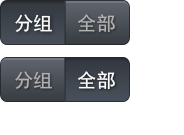
<style>
.page{position:relative;width:184px;height:135px;background:#ffffff}
.page>*{position:absolute;margin:0}
.t1{font:19.3px "SimHei";color:#ffffff}
.t2{font:19.3px "SimHei";color:#b5b5b5}
</style>
<div class="page">
<p class="t1" style="left:15px;top:14px;width:37px;height:18px">分组</p>
<p class="t2" style="left:78px;top:14px;width:37px;height:19px;opacity:0.96">全部</p>
<p class="t2" style="left:15px;top:71px;width:37px;height:18px;opacity:0.96">分组</p>
<p class="t1" style="left:78px;top:71px;width:37px;height:19px">全部</p>
</div>
